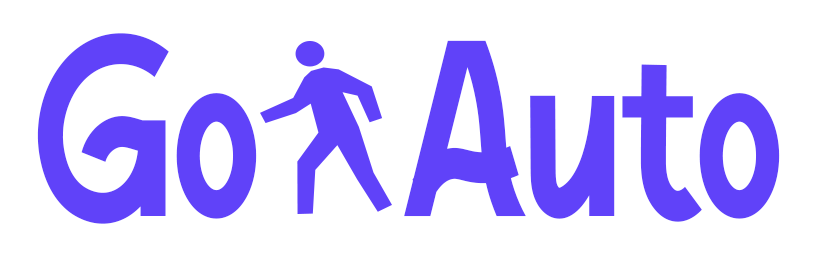
<style>
.page{position:relative;width:835px;height:276px;background:#ffffff}
.page>*{position:absolute;margin:0}
.t1{font:254.1px "HangerpersonaluseRegular";color:#6042f9;scale:0.81 1}
</style>
<div class="page">
<p class="t1" style="left:37px;top:33px;width:743px;height:191px">Go  Auto</p>
</div>
